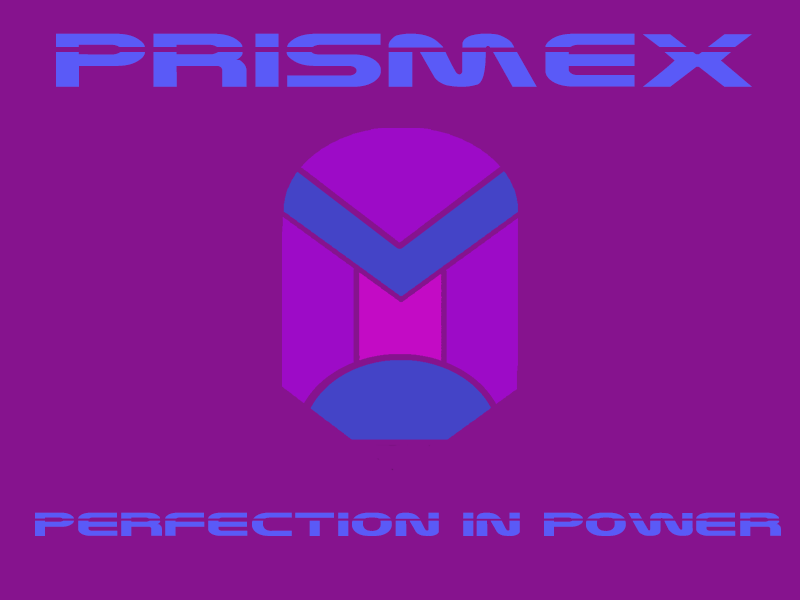
<style>
.page{position:relative;width:800px;height:600px;background:#86138e}
.page>*{position:absolute;margin:0}
.t1{font:80px "Laserian";color:#5a5af7}
.t2{font:35px "Laserian";color:#5a5af7}
</style>
<div class="page">
<p class="t1" style="left:56px;top:33px;width:696px;height:54px">PRISMEX</p>
<p class="t2" style="left:35px;top:512px;width:746px;height:24px">PERFECTION IN POWER</p>
</div>
